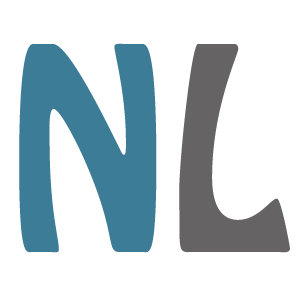
<style>
.page{position:relative;width:300px;height:300px;background:#ffffff}
.page>*{position:absolute;margin:0}
.t1{font:250px "HoboStd";color:#3c7c97;scale:0.9 1}
.t2{font:250px "HoboStd";color:#656364;scale:0.9 1}
</style>
<div class="page">
<p class="t1" style="left:19px;top:43px;width:271px;height:210px">N<span class="t2">L</span></p>
</div>
